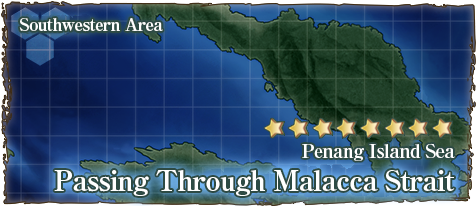
<style>
.page{position:relative;width:476px;height:206px}
.page>*{position:absolute;margin:0}
.t1{font:17px "RyuminPro-ExBold";letter-spacing:-0.04em;color:#ffffff}
.t2{font:19px "RyuminPro-ExBold";letter-spacing:-0.04em;color:#ffffff}
.t3{font:28px "RyuminPro-ExBold";letter-spacing:-0.04em;color:#ffffff}
</style>
<div class="page">
<p class="t1" style="left:19px;top:18px;width:144px;height:14px">Southwestern Area</p>
<p class="t2" style="left:302px;top:143px;width:153px;height:18px">Penang Island Sea</p>
<p class="t3" style="left:54px;top:170px;width:401px;height:26px">Passing Through Malacca Strait</p>
</div>
